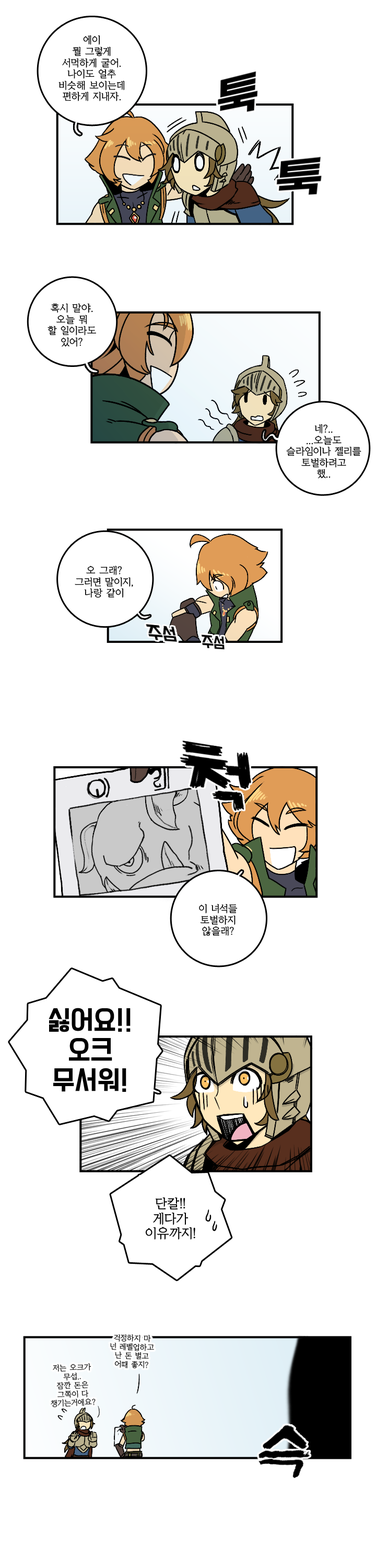
<style>
.page{position:relative;width:376px;height:1568px;background:#ffffff}
.page>*{position:absolute;margin:0}
.t1{font:9.4px "KoreanYMJ-B";color:#000000}
.t2{font:25.1px "TTComsetakR";color:#000000}
.t3{font:12.5px "KoreanYMJ-B";color:#000000}
.t4{font:7.3px "KoreanYMJ-B";color:#000000}
</style>
<div class="page">
<p class="t1" style="left:59px;top:35px;width:65px;height:66px;text-align:center">에이<br>뭘 그렇게<br>서먹하게 굴어.<br>나이도 얼추<br>비슷해 보이는데<br>편하게 지내자.</p>
<p class="t1" style="left:48px;top:303px;width:48px;height:44px;text-align:center">혹시 말야.<br>오늘 뭐<br>할 일이라도<br>있어?</p>
<p class="t1" style="left:286px;top:424px;width:76px;height:54px;text-align:center">네?..<br>...오늘도<br>슬라임이나 젤리를<br>토벌하려고<br>했..</p>
<p class="t1" style="left:75px;top:566px;width:58px;height:32px;text-align:center">오 그래?<br>그러면 말이지,<br>나랑 같이</p>
<p class="t1" style="left:199px;top:904px;width:39px;height:32px;text-align:center">이 녀석들<br>토벌하지<br>않을래?</p>
<p class="t2" style="left:49px;top:1008px;width:82px;height:84px;text-align:center">싫어요!!<br>오크<br>무서워!</p>
<p class="t3" style="left:146px;top:1197px;width:49px;height:43px;text-align:center">단칼!!<br>게다가<br>이유까지!</p>
<p class="t4" style="left:110px;top:1334px;width:44px;height:34px;text-align:center;rotate:2deg">걱정하지 마<br>넌 레벨업하고<br>난 돈 벌고<br>어때 좋지?</p>
<p class="t4" style="left:51px;top:1363px;width:45px;height:45px;text-align:center;rotate:-2deg">저는 오크가<br>무섭..<br>잠깐 돈은<br>그쪽이 다<br>챙기는거에요?</p>
</div>
